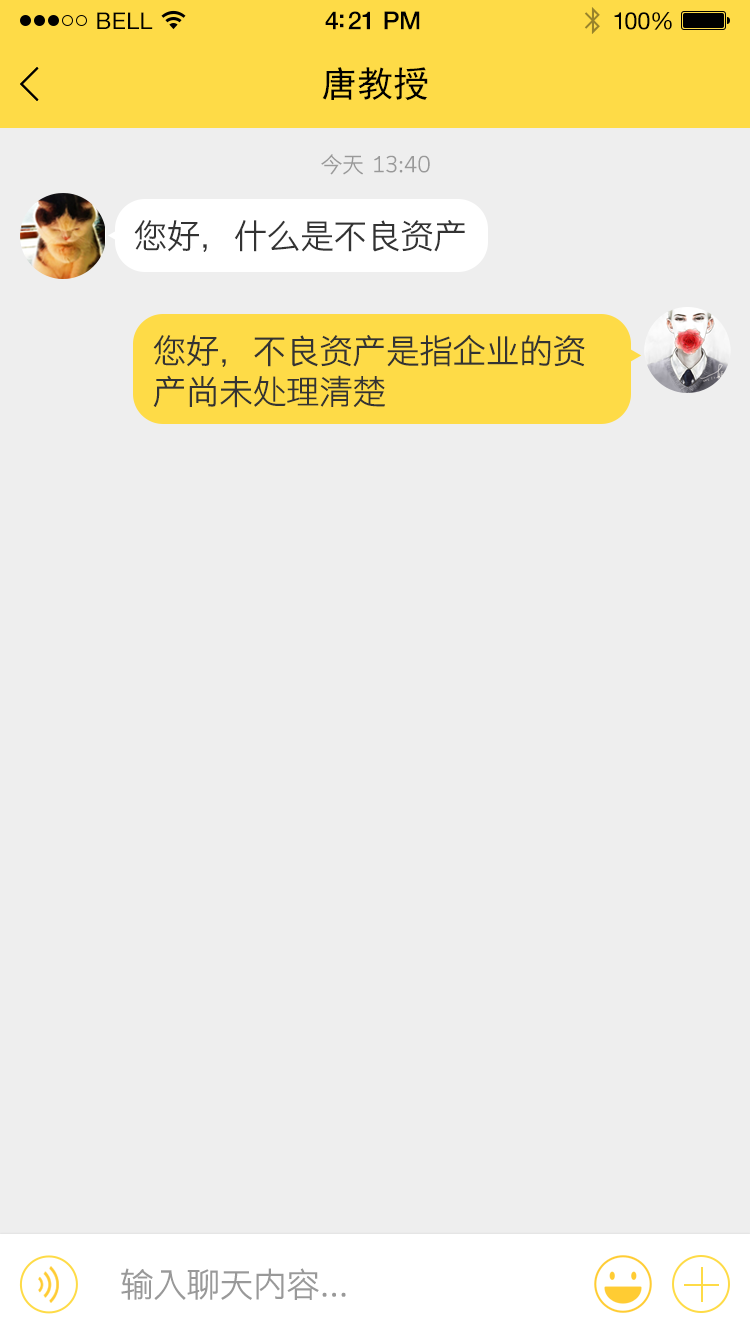
<style>
.page{position:relative;width:750px;height:1334px;background:#eeeeee}
.page>*{position:absolute;margin:0}
.t1{font:23px "HelveticaNeue";letter-spacing:0.02em;color:#000000}
.t2{font:25px "HelveticaNeue-Medium";letter-spacing:-0.02em;color:#000000}
.t3{font:24px "HelveticaNeue";letter-spacing:-0.02em;color:#010101}
.t4{font:36px "SimHei";color:#000000}
.t5{font:22px "STHeitiSC-Light";letter-spacing:-0.02em;color:#999999}
.t6{font:34px "STHeitiSC-Light";letter-spacing:-0.02em;color:#333333}
.t7{font:34px "STHeitiSC-Light";letter-spacing:-0.02em;color:#999999}
</style>
<div class="page">
<p class="t1" style="left:97px;top:12px;width:56px;height:17px">BELL</p>
<p class="t1" style="left:97px;top:12px;width:56px;height:17px">BELL</p>
<p class="t2" style="left:325px;top:11px;width:95px;height:19px">4:21 PM</p>
<p class="t2" style="left:325px;top:11px;width:95px;height:19px">4:21 PM</p>
<p class="t3" style="left:614px;top:12px;width:58px;height:18px">100%</p>
<p class="t3" style="left:614px;top:12px;width:58px;height:18px">100%</p>
<p class="t4" style="left:322px;top:67px;width:106px;height:34px">唐教授</p>
<p class="t5" style="left:321px;top:154px;width:109px;height:21px">今天  13:40</p>
<p class="t6" style="left:134px;top:220px;width:331px;height:32px">您好，什么是不良资产</p>
<p class="t6" style="left:153px;top:334px;width:432px;height:74px">您好，不良资产是指企业的资<br>产尚未处理清楚</p>
<p class="t7" style="left:121px;top:1268px;width:225px;height:32px">输入聊天内容...</p>
</div>
